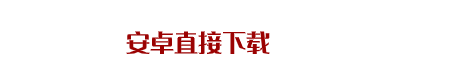
<style>
.page{position:relative;width:450px;height:70px;background:#ffffff}
.page>*{position:absolute;margin:0}
.t1{font:24px "SourceHanSansSC-Light";color:#9b0202}
</style>
<div class="page">
<p class="t1" style="left:126px;top:31px;width:144px;height:24px">安卓直接下载</p>
</div>
